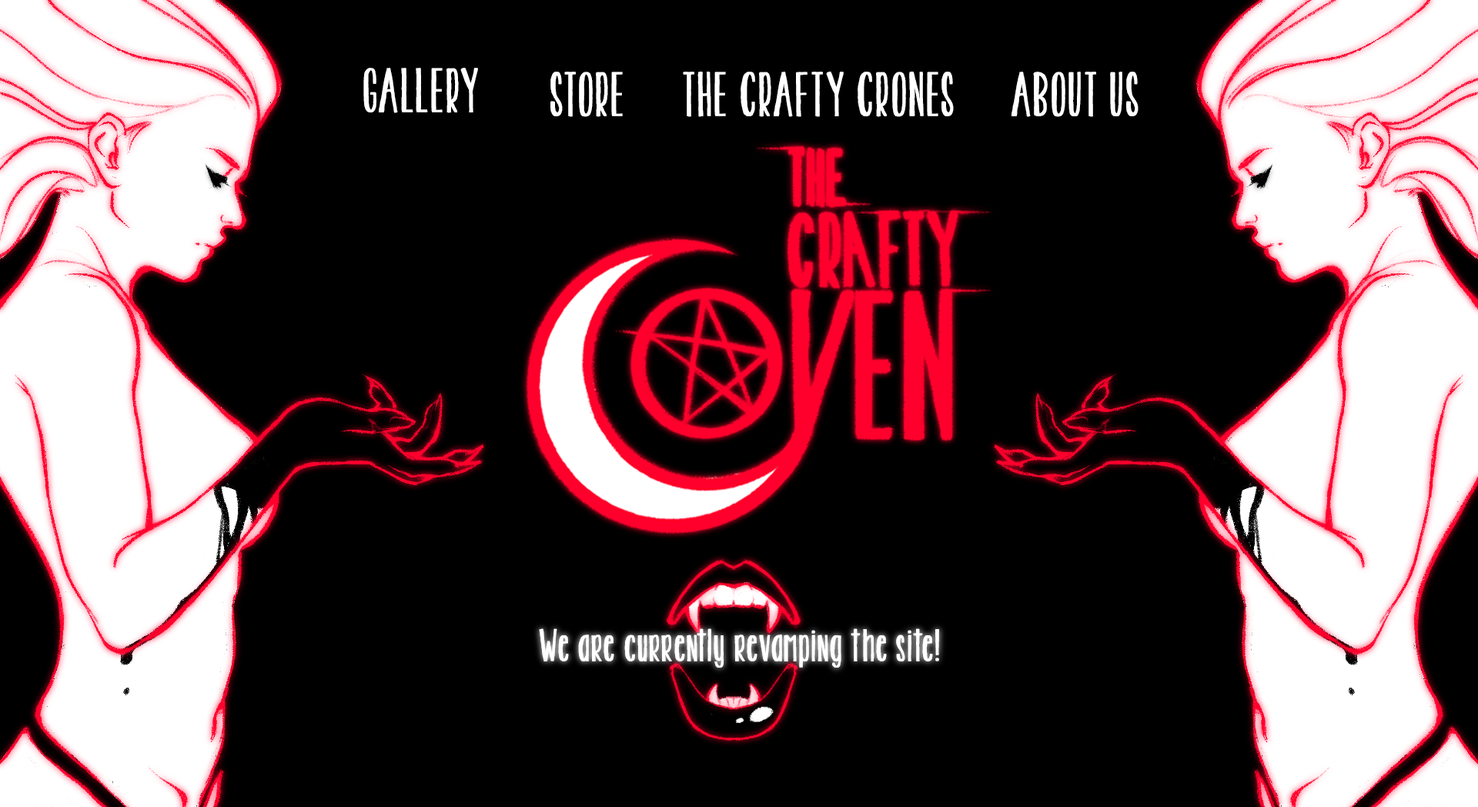
<style>
.page{position:relative;width:1478px;height:807px;background:#000000}
.page>*{position:absolute;margin:0}
.t1{font:51.3px "KGTwoisBetterThanOne";color:#ffffff;font-weight:bold}
.t2{font:37.3px "KGTwoisBetterThanOne";color:#ffffff;font-weight:bold}
</style>
<div class="page">
<p class="t1" style="left:363px;top:68px;width:115px;height:45px">GALLERY</p>
<p class="t1" style="left:550px;top:72px;width:73px;height:45px">STORE</p>
<p class="t1" style="left:683px;top:72px;width:271px;height:45px">THE CRAFTY CRONES</p>
<p class="t1" style="left:1012px;top:72px;width:127px;height:45px">ABOUT US</p>
<p class="t2" style="left:539px;top:628px;width:400px;height:39px">We are currently revamping the site!</p>
</div>
